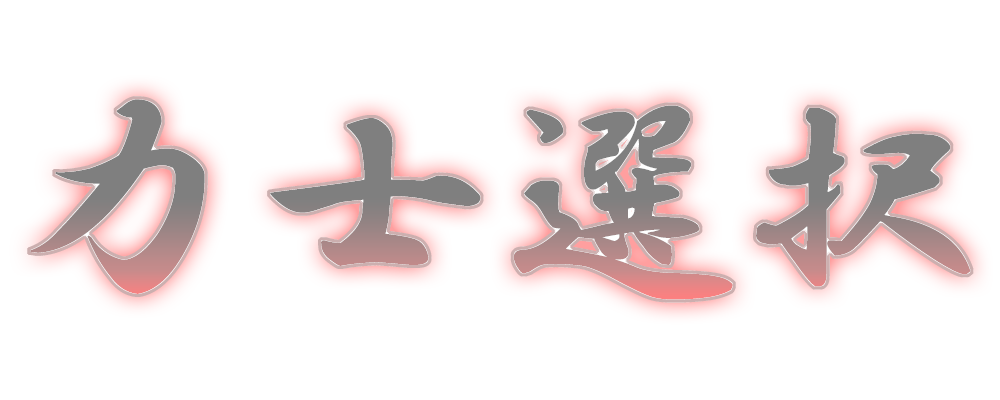
<style>
.page{position:relative;width:1000px;height:400px;background:#ffffff}
.page>*{position:absolute;margin:0}
.t1{font:238.9px "HGSGyoshotai";font-weight:bold}
</style>
<div class="page">
<p class="t1" style="left:30px;top:99px;width:941px;height:201px">力士選択</p>
</div>
